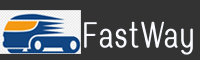
<style>
.page{position:relative;width:200px;height:60px;background:#333333}
.page>*{position:absolute;margin:0}
.t1{font:37.4px "Gayathri-Regular";letter-spacing:0.08em;color:#f9faff;font-weight:bold;scale:0.67 1}
</style>
<div class="page">
<p class="t1" style="left:84px;top:21px;width:109px;height:34px">FastWay</p>
</div>
